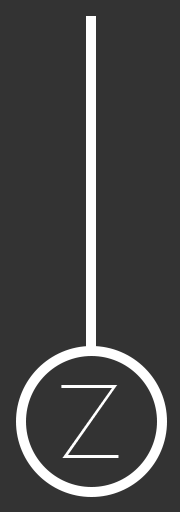
<style>
.page{position:relative;width:180px;height:512px;background:#333333}
.page>*{position:absolute;margin:0}
.t1{font:91px "Adequate-ExtraLight";color:#ffffff}
</style>
<div class="page">
<p class="t1" style="left:61px;top:385px;width:58px;height:73px">Z</p>
</div>
